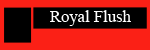
<style>
.page{position:relative;width:150px;height:50px;background:#fb2016}
.page>*{position:absolute;margin:0}
.t1{font:16.7px "TimesNewRomanPSMT";color:#ffffff}
</style>
<div class="page">
<p class="t1" style="left:50px;top:10px;width:81px;height:16px">Royal Flush</p>
</div>
